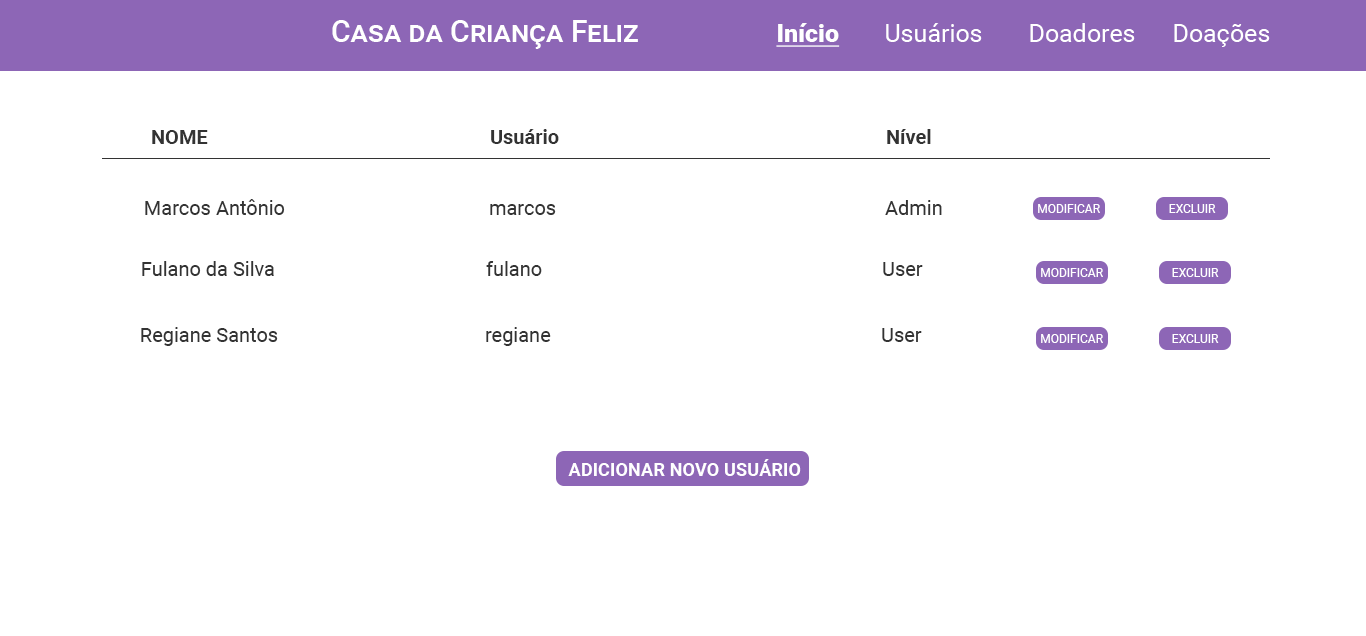
<style>
.page{position:relative;width:1366px;height:636px;background:#ffffff}
.page>*{position:absolute;margin:0}
.t1{font:30px "Roboto-Medium";color:#ffffff;font-variant:small-caps}
.t2{font:25px "Roboto-Regular";color:#ffffff}
.t3{font:25px "Roboto-Black";color:#ffffff;text-decoration:underline}
.t4{font:20px "Roboto-Bold";color:#333333}
.t5{font:20px "Roboto-Regular";color:#333333}
.t6{font:12px "Roboto-Regular";color:#ffffff}
.t7{font:18.3px "Roboto-Bold";color:#ffffff}
</style>
<div class="page">
<p class="t1" style="left:332px;top:20px;width:306px;height:29px">Casa da Criança Feliz</p>
<p class="t2" style="left:776px;top:23px;width:494px;height:24px"><span class="t3">Início</span>  Usuários  Doadores  Doações</p>
<p class="t4" style="left:152px;top:129px;width:779px;height:15px">NOME           Usuário            Nível</p>
<p class="t5" style="left:145px;top:199px;width:797px;height:16px">Marcos Antônio      marcos          Admin</p>
<p class="t6" style="left:1038px;top:204px;width:62px;height:9px">MODIFICAR</p>
<p class="t6" style="left:1169px;top:204px;width:47px;height:9px">EXCLUIR</p>
<p class="t5" style="left:142px;top:261px;width:781px;height:15px">Fulano da Silva      fulano          User</p>
<p class="t6" style="left:1041px;top:268px;width:62px;height:9px">MODIFICAR</p>
<p class="t6" style="left:1172px;top:268px;width:47px;height:9px">EXCLUIR</p>
<p class="t5" style="left:141px;top:327px;width:781px;height:19px">Regiane Santos      regiane          User</p>
<p class="t6" style="left:1041px;top:334px;width:62px;height:9px">MODIFICAR</p>
<p class="t6" style="left:1172px;top:334px;width:47px;height:9px">EXCLUIR</p>
<p class="t7" style="left:568px;top:459px;width:233px;height:17px">ADICIONAR NOVO USUÁRIO</p>
</div>
